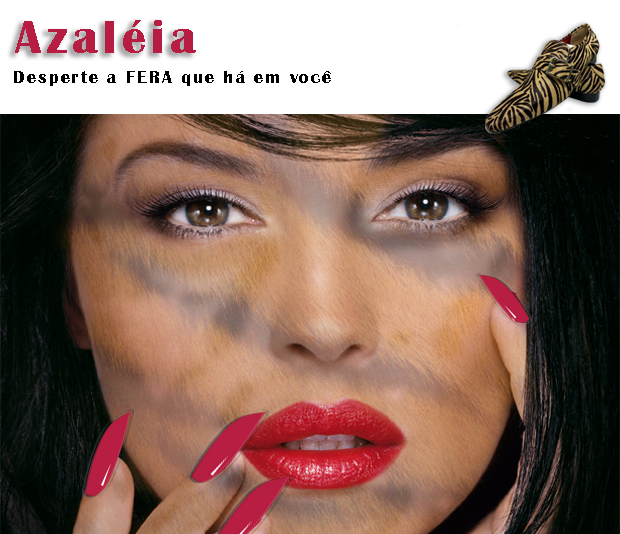
<style>
.page{position:relative;width:620px;height:534px}
.page>*{position:absolute;margin:0}
.t1{font:48px "BritannicBold";letter-spacing:0.11em;color:#b71d43}
.t2{font:18px "BritannicBold";letter-spacing:0.11em;color:#000000}
</style>
<div class="page">
<p class="t1" style="left:15px;top:20px;width:181px;height:33px">Azaléia</p>
<p class="t2" style="left:14px;top:71px;width:317px;height:15px">Desperte a FERA que há em você</p>
</div>
